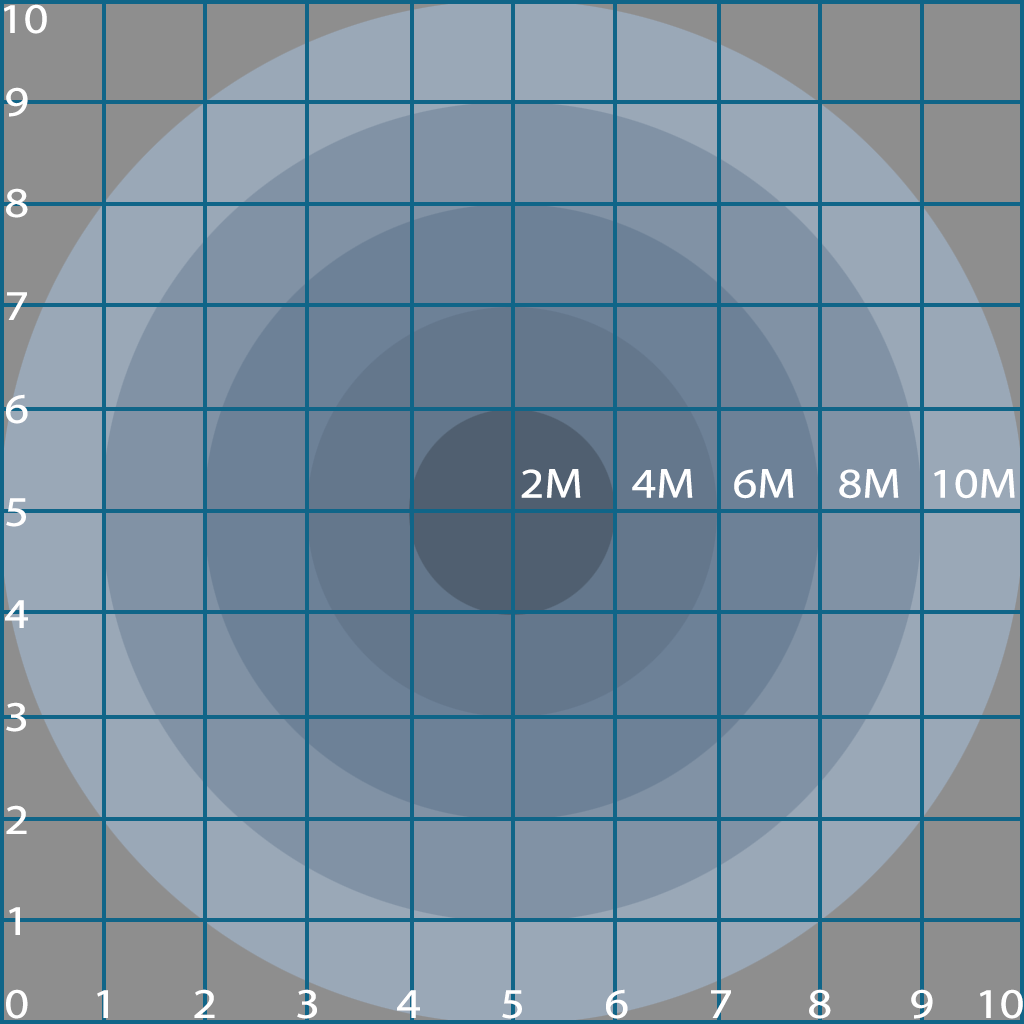
<style>
.page{position:relative;width:1024px;height:1024px;background:#9aa8b7}
.page>*{position:absolute;margin:0}
.t1{font:42.2px "MyriadPro-Regular";color:#ffffff;text-transform:uppercase;scale:1.14 1}
</style>
<div class="page">
<p class="t1" style="left:4px;top:4px;width:43px;height:30px">10</p>
<p class="t1" style="left:6px;top:87px;width:22px;height:30px">9</p>
<p class="t1" style="left:6px;top:188px;width:22px;height:30px">8</p>
<p class="t1" style="left:7px;top:292px;width:20px;height:28px">7</p>
<p class="t1" style="left:6px;top:394px;width:22px;height:30px">6</p>
<p class="t1" style="left:521px;top:469px;width:60px;height:29px">2m</p>
<p class="t1" style="left:632px;top:469px;width:61px;height:29px">4m</p>
<p class="t1" style="left:734px;top:469px;width:60px;height:30px">6m</p>
<p class="t1" style="left:839px;top:469px;width:60px;height:30px">8m</p>
<p class="t1" style="left:934px;top:469px;width:81px;height:30px">10m</p>
<p class="t1" style="left:6px;top:498px;width:20px;height:29px">5</p>
<p class="t1" style="left:5px;top:600px;width:23px;height:28px">4</p>
<p class="t1" style="left:6px;top:702px;width:20px;height:30px">3</p>
<p class="t1" style="left:6px;top:805px;width:21px;height:29px">2</p>
<p class="t1" style="left:9px;top:907px;width:11px;height:28px">1</p>
<p class="t1" style="left:6px;top:989px;width:22px;height:30px">0</p>
<p class="t1" style="left:97px;top:990px;width:11px;height:28px">1</p>
<p class="t1" style="left:194px;top:989px;width:21px;height:29px">2</p>
<p class="t1" style="left:297px;top:989px;width:20px;height:30px">3</p>
<p class="t1" style="left:397px;top:990px;width:23px;height:28px">4</p>
<p class="t1" style="left:502px;top:990px;width:20px;height:29px">5</p>
<p class="t1" style="left:606px;top:989px;width:22px;height:30px">6</p>
<p class="t1" style="left:711px;top:990px;width:20px;height:28px">7</p>
<p class="t1" style="left:809px;top:989px;width:22px;height:30px">8</p>
<p class="t1" style="left:911px;top:989px;width:22px;height:30px">9</p>
<p class="t1" style="left:980px;top:989px;width:43px;height:30px">10</p>
</div>
